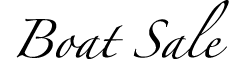
<style>
.page{position:relative;width:250px;height:75px;background:#ffffff}
.page>*{position:absolute;margin:0}
.t1{font:34px "Zapfino";color:#000000}
</style>
<div class="page">
<p class="t1" style="left:16px;top:0px;width:213px;height:59px;text-align:center">Boat Sale</p>
</div>
